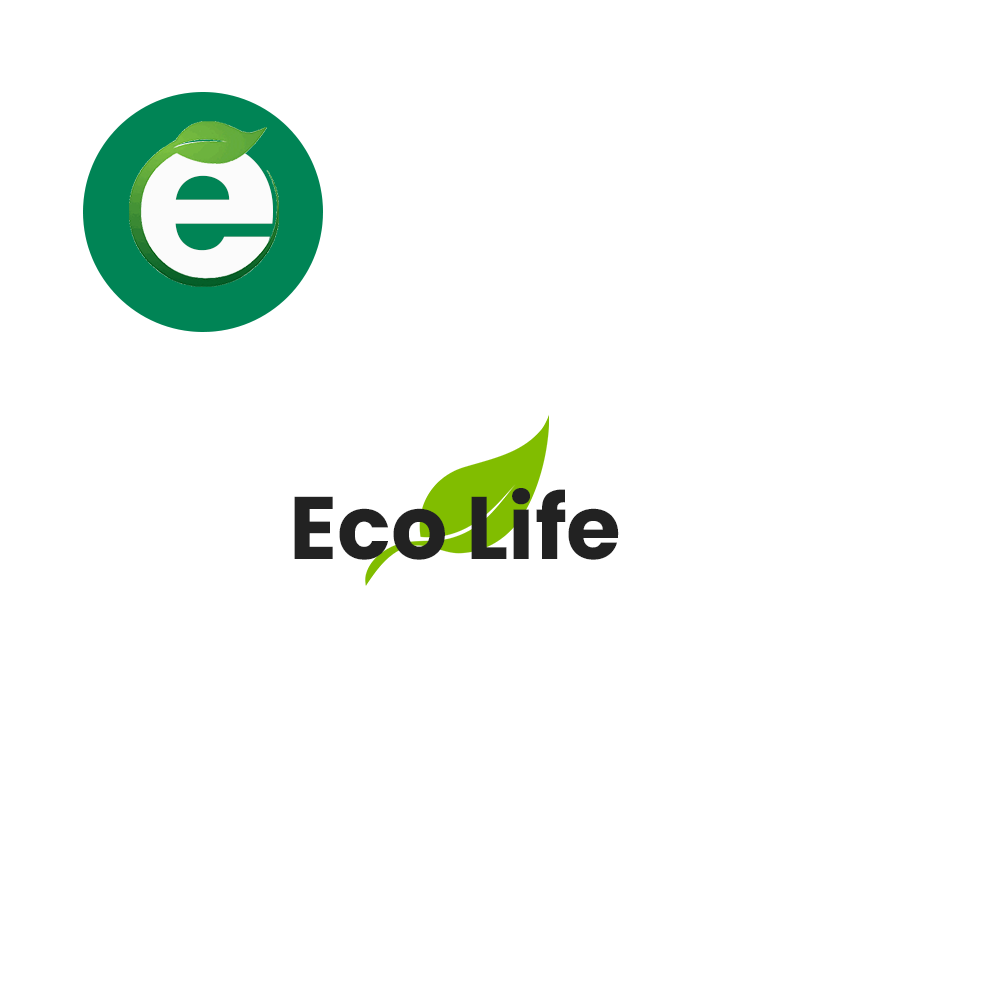
<style>
.page{position:relative;width:1000px;height:1000px;background:#ffffff}
.page>*{position:absolute;margin:0}
.t1{font:250px "Poppins-Bold";color:#fbfbfb}
.t2{font:88.7px "Poppins-Bold";color:#222222}
</style>
<div class="page">
<p class="t1" style="left:133px;top:141px;width:140px;height:144px">e</p>
<p class="t2" style="left:294px;top:488px;width:325px;height:72px">Eco Life</p>
</div>
